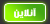
<style>
.page{position:relative;width:50px;height:24px}
.page>*{position:absolute;margin:0}
.t1{font:9.9px "Mj_EastExtra-Bold";color:#ffffff}
</style>
<div class="page">
<p class="t1" style="left:14px;top:8px;width:22px;height:10px">آنلاین</p>
</div>
